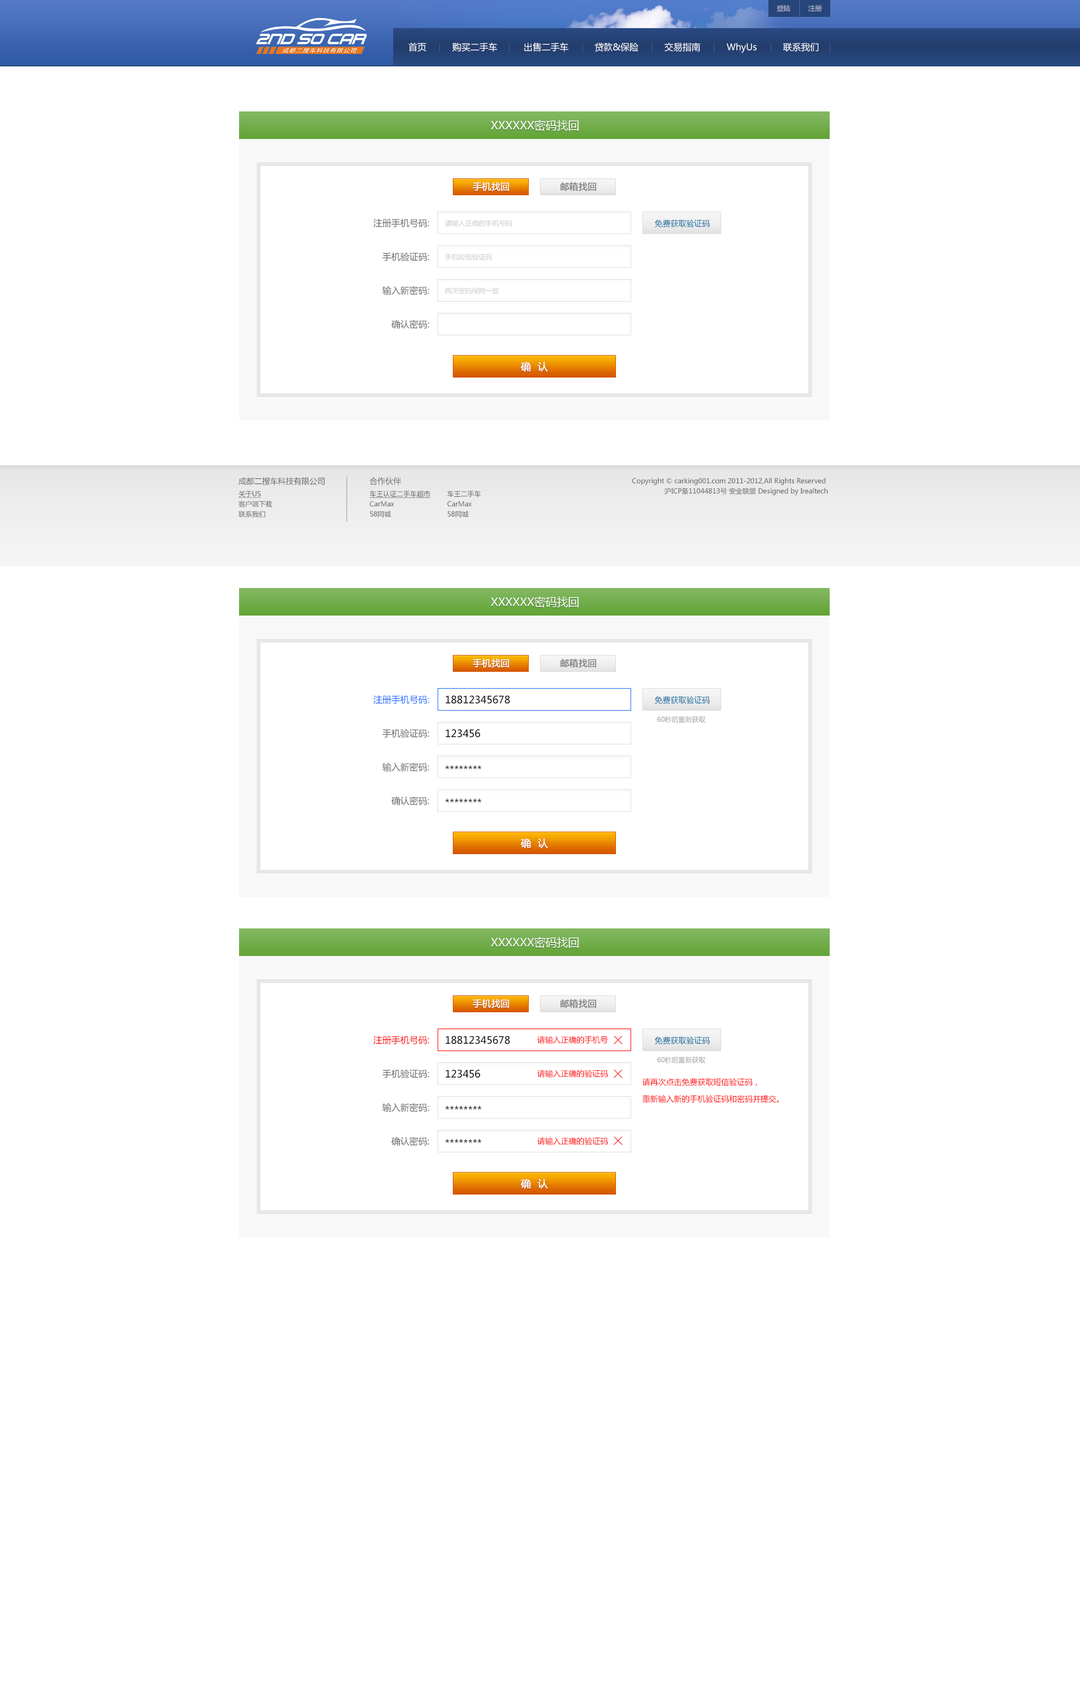
<style>
.page{position:relative;width:1080px;height:1688px;background:#ffffff}
.page>*{position:absolute;margin:0}
.t1{font:6.8px "MicrosoftYaHei";color:#bdc3d1}
.t2{font:9px "MicrosoftYaHei";color:#ffffff}
.t3{font:11.2px "MicrosoftYaHei";color:#ffffff;text-transform:uppercase}
.t4{font:9px "MicrosoftYaHei";color:#ffffff;text-transform:uppercase;font-weight:bold}
.t5{font:9px "MicrosoftYaHei";color:#7f7f7f;text-transform:uppercase;font-weight:bold}
.t6{font:9px "MicrosoftYaHei";color:#666666;text-transform:uppercase}
.t7{font:6.8px "MicrosoftYaHei";color:#c8c8c8}
.t8{font:7.9px "MicrosoftYaHei";color:#04699c}
.t9{font:10.1px "MicrosoftYaHei";color:#ffffff;text-transform:uppercase;font-weight:bold}
.t10{font:7.9px "MicrosoftYaHei";color:#666666}
.t11{font:6.8px/10.1px "MicrosoftYaHei";color:#666666}
.t12{font:7.9px/13.5px "MicrosoftYaHei";color:#666666}
.t13{font:6.8px/10.1px "MicrosoftYaHei";color:#666666;text-decoration:underline}
.t14{font:9px "MicrosoftYaHei";color:#156bff;text-transform:uppercase}
.t15{font:10.1px "MicrosoftYaHei";color:#000000}
.t16{font:6.8px "MicrosoftYaHei";color:#9e9e9e}
.t17{font:9px "MicrosoftYaHei";color:#ff0000;text-transform:uppercase}
.t18{font:7.9px "MicrosoftYaHei";color:#ff0000}
.t19{font:7.9px/16.9px "MicrosoftYaHei";color:#ff0000}
</style>
<div class="page">
<p class="t1" style="left:777px;top:5px;width:45px;height:7px">登陆         注册</p>
<p class="t2" style="left:408px;top:42px;width:410px;height:11px">首页 购买二手车 出售二手车 贷款&amp;保险 交易指南 WhyUs 联系我们</p>
<p class="t3" style="left:490px;top:120px;width:89px;height:11px">XXXXXX密码找回</p>
<p class="t4" style="left:472px;top:182px;width:37px;height:9px">手机找回</p>
<p class="t5" style="left:560px;top:182px;width:36px;height:9px">邮箱找回</p>
<p class="t6" style="left:374px;top:218px;width:55px;height:10px">注册手机号码:</p>
<p class="t7" style="left:445px;top:220px;width:67px;height:7px">请输入正确的手机号码</p>
<p class="t8" style="left:655px;top:219px;width:55px;height:8px">免费获取验证码</p>
<p class="t6" style="left:382px;top:252px;width:47px;height:10px">手机验证码:</p>
<p class="t7" style="left:445px;top:254px;width:47px;height:6px">手机短信验证码</p>
<p class="t6" style="left:382px;top:286px;width:47px;height:9px">输入新密码:</p>
<p class="t7" style="left:445px;top:287px;width:54px;height:7px">两次密码保持一致</p>
<p class="t6" style="left:392px;top:320px;width:37px;height:9px">确认密码:</p>
<p class="t9" style="left:520px;top:362px;width:28px;height:10px">确  认</p>
<p class="t10" style="left:238px;top:477px;width:87px;height:8px">成都二搜车科技有限公司</p>
<p class="t11" style="left:370px;top:477px;width:61px;height:41px"><span class="t12">合作伙伴<br></span><span class="t13">车王认证二手车超市<br></span>CarMax<br>58同城</p>
<p class="t11" style="left:632px;top:478px;width:196px;height:17px;text-align:right">Copyright © carking001.com 2011-2012,All Rights Reserved <br>沪ICP备11044813号 安全联盟 Designed by Irealtech</p>
<p class="t11" style="left:238px;top:490px;width:34px;height:28px"><span class="t13">关于US<br></span>客户端下载<br>联系我们</p>
<p class="t11" style="left:447px;top:490px;width:34px;height:28px">车王二手车<br>CarMax<br>58同城</p>
<p class="t3" style="left:490px;top:596px;width:89px;height:12px">XXXXXX密码找回</p>
<p class="t4" style="left:472px;top:658px;width:37px;height:10px">手机找回</p>
<p class="t5" style="left:560px;top:658px;width:36px;height:10px">邮箱找回</p>
<p class="t14" style="left:374px;top:695px;width:55px;height:9px">注册手机号码:</p>
<p class="t15" style="left:446px;top:695px;width:64px;height:9px">18812345678</p>
<p class="t8" style="left:655px;top:696px;width:55px;height:8px">免费获取验证码</p>
<p class="t16" style="left:657px;top:716px;width:48px;height:7px">60秒后重新获取</p>
<p class="t6" style="left:382px;top:728px;width:47px;height:10px">手机验证码:</p>
<p class="t15" style="left:446px;top:729px;width:34px;height:8px">123456</p>
<p class="t6" style="left:382px;top:762px;width:47px;height:10px">输入新密码:</p>
<p class="t15" style="left:445px;top:765px;width:37px;height:4px">********</p>
<p class="t6" style="left:392px;top:796px;width:37px;height:10px">确认密码:</p>
<p class="t15" style="left:445px;top:798px;width:37px;height:4px">********</p>
<p class="t9" style="left:520px;top:838px;width:28px;height:10px">确  认</p>
<p class="t3" style="left:490px;top:937px;width:89px;height:11px">XXXXXX密码找回</p>
<p class="t4" style="left:472px;top:998px;width:37px;height:10px">手机找回</p>
<p class="t5" style="left:560px;top:998px;width:36px;height:10px">邮箱找回</p>
<p class="t17" style="left:374px;top:1035px;width:55px;height:10px">注册手机号码:</p>
<p class="t15" style="left:446px;top:1036px;width:64px;height:8px">18812345678</p>
<p class="t18" style="left:537px;top:1036px;width:71px;height:7px">请输入正确的手机号</p>
<p class="t8" style="left:655px;top:1036px;width:55px;height:8px">免费获取验证码</p>
<p class="t16" style="left:657px;top:1056px;width:48px;height:7px">60秒后重新获取</p>
<p class="t6" style="left:382px;top:1069px;width:47px;height:9px">手机验证码:</p>
<p class="t15" style="left:446px;top:1069px;width:34px;height:9px">123456</p>
<p class="t18" style="left:537px;top:1069px;width:71px;height:8px">请输入正确的验证码</p>
<p class="t19" style="left:642px;top:1078px;width:137px;height:24px">请再次点击免费获取短信验证码，<br>重新输入新的手机验证码和密码并提交。</p>
<p class="t6" style="left:382px;top:1102px;width:47px;height:10px">输入新密码:</p>
<p class="t15" style="left:445px;top:1105px;width:37px;height:4px">********</p>
<p class="t6" style="left:392px;top:1136px;width:37px;height:10px">确认密码:</p>
<p class="t15" style="left:445px;top:1138px;width:37px;height:4px">********</p>
<p class="t18" style="left:537px;top:1137px;width:71px;height:8px">请输入正确的验证码</p>
<p class="t9" style="left:520px;top:1178px;width:28px;height:11px">确  认</p>
</div>
